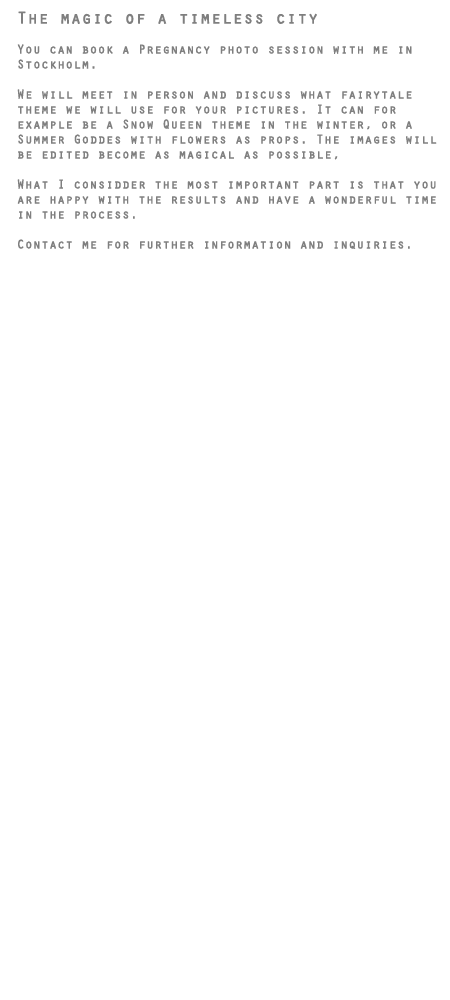
<style>
.page{position:relative;width:450px;height:1000px;background:#ffffff}
.page>*{position:absolute;margin:0}
.t1{font:12.5px "Orator-Regular";color:#7f7f7f;font-weight:bold}
.t2{font:16.7px "Orator-Regular";color:#7f7f7f;font-weight:bold}
</style>
<div class="page">
<p class="t1" style="left:17px;top:11px;width:420px;height:238px;text-align:right"><span class="t2">The magic of a timeless city<br></span><br>You can book a Pregnancy photo session with me in <br>Stockholm.<br><br>We will meet in person and discuss what fairytale<br>theme we will use for your pictures. It can for<br>example be a Snow Queen theme in the winter, or a <br>Summer Goddes with flowers as props. The images will <br>be edited become as magical as possible,<br><br>What I considder the most important part is that you <br>are happy with the results and have a wonderful time<br>in the process.<br><br>Contact me for further information and inquiries.</p>
</div>
